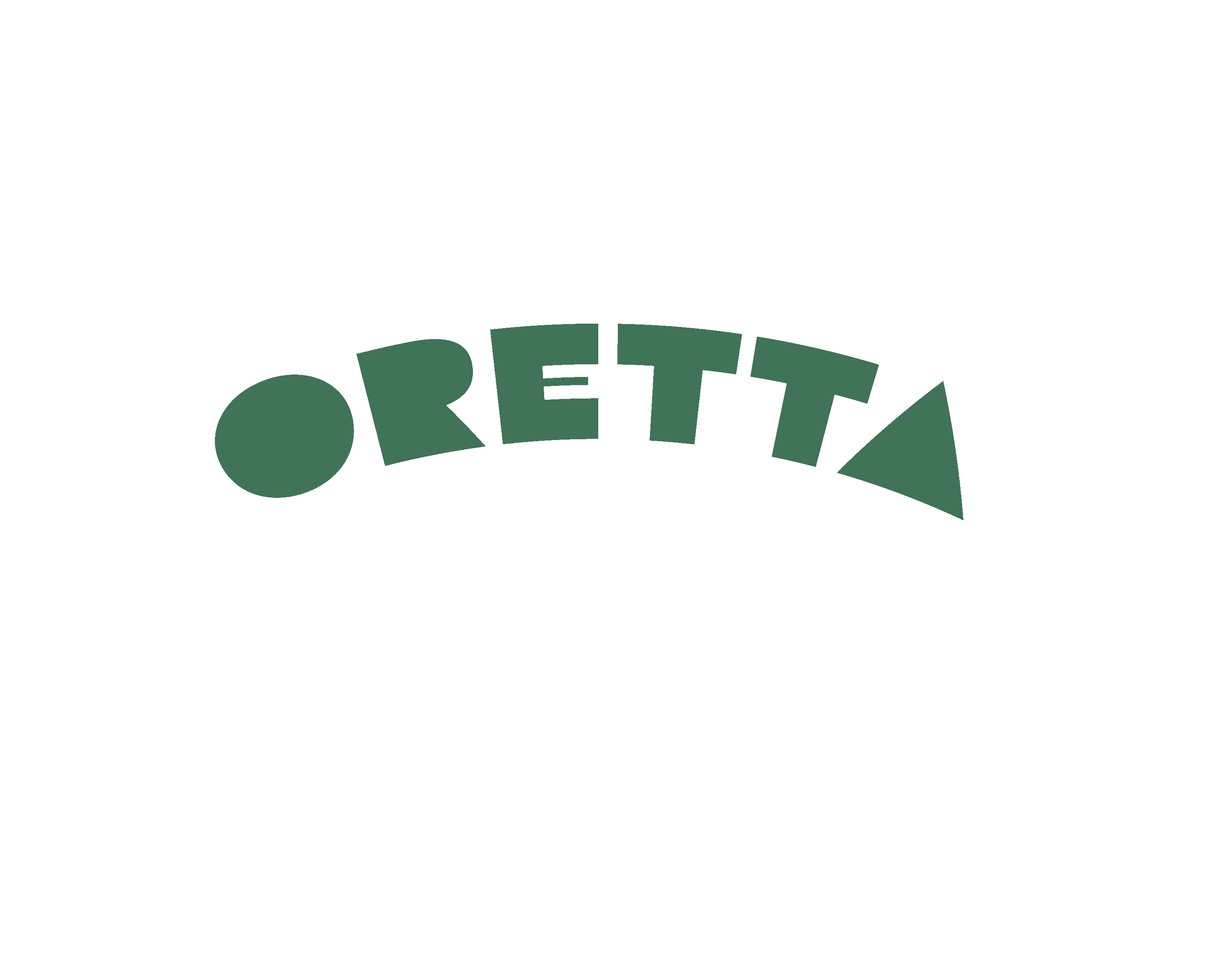
<style>
.page{position:relative;width:1221px;height:977px;background:#ffffff}
.page>*{position:absolute;margin:0}
.t1{font:164.5px "Flegrei-Regular";letter-spacing:0.02em;color:#417358}
</style>
<div class="page">
<p class="t1" style="left:215px;top:324px;width:748px;height:196px">ORETTA</p>
</div>
